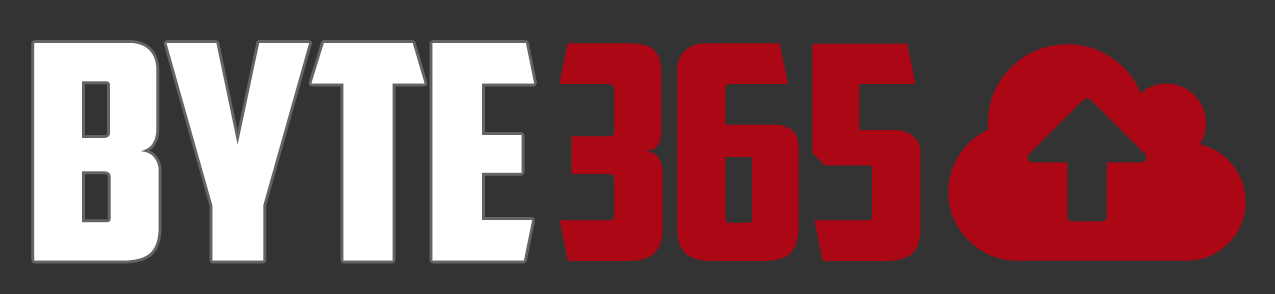
<style>
.page{position:relative;width:1275px;height:294px;background:#333333}
.page>*{position:absolute;margin:0}
.t1{font:300px "AmericanCaptain";letter-spacing:-0.015em;color:#ffffff;scale:1.1 1}
.t2{font:300px "AmericanCaptain";letter-spacing:-0.015em;color:#ab0715;scale:1.1 1}
</style>
<div class="page">
<p class="t1" style="left:34px;top:43px;width:500px;height:218px">BYTE</p>
<p class="t2" style="left:559px;top:43px;width:362px;height:218px">365</p>
</div>
